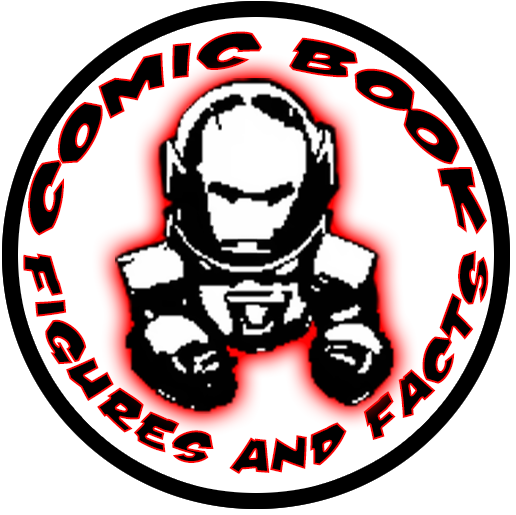
<style>
.page{position:relative;width:516px;height:515px;background:#ffffff}
.page>*{position:absolute;margin:0}
.t1{font:49px "DamnNoisyKids";color:#000000}
.t2{font:49px "DamnNoisyKids";color:#000000;scale:0.92 1}
</style>
<div class="page">
<p class="t1" style="left:28px;top:31px;width:459px;height:205px">Comic Book</p>
<p class="t2" style="left:23px;top:250px;width:466px;height:224px">Figures and Facts</p>
</div>
